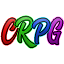
<style>
.page{position:relative;width:64px;height:64px;background:#ffffff}
.page>*{position:absolute;margin:0}
.t1{font:36.5px "CallingHeart";scale:0.83 1}
</style>
<div class="page">
<p class="t1" style="left:15px;top:16px;width:22px;height:32px">R</p>
<p class="t1" style="left:47px;top:17px;width:16px;height:28px">G</p>
<p class="t1" style="left:1px;top:18px;width:18px;height:27px">C</p>
<p class="t1" style="left:32px;top:18px;width:19px;height:26px">P</p>
</div>
